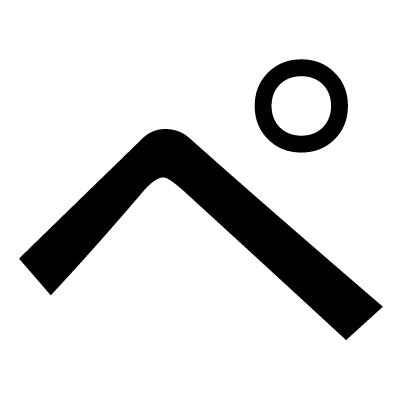
<style>
.page{position:relative;width:400px;height:400px;background:#ffffff}
.page>*{position:absolute;margin:0}
.t1{font:424.8px "MS-PGothic";color:#000000}
</style>
<div class="page">
<p class="t1" style="left:19px;top:59px;width:364px;height:281px">ペ</p>
</div>
